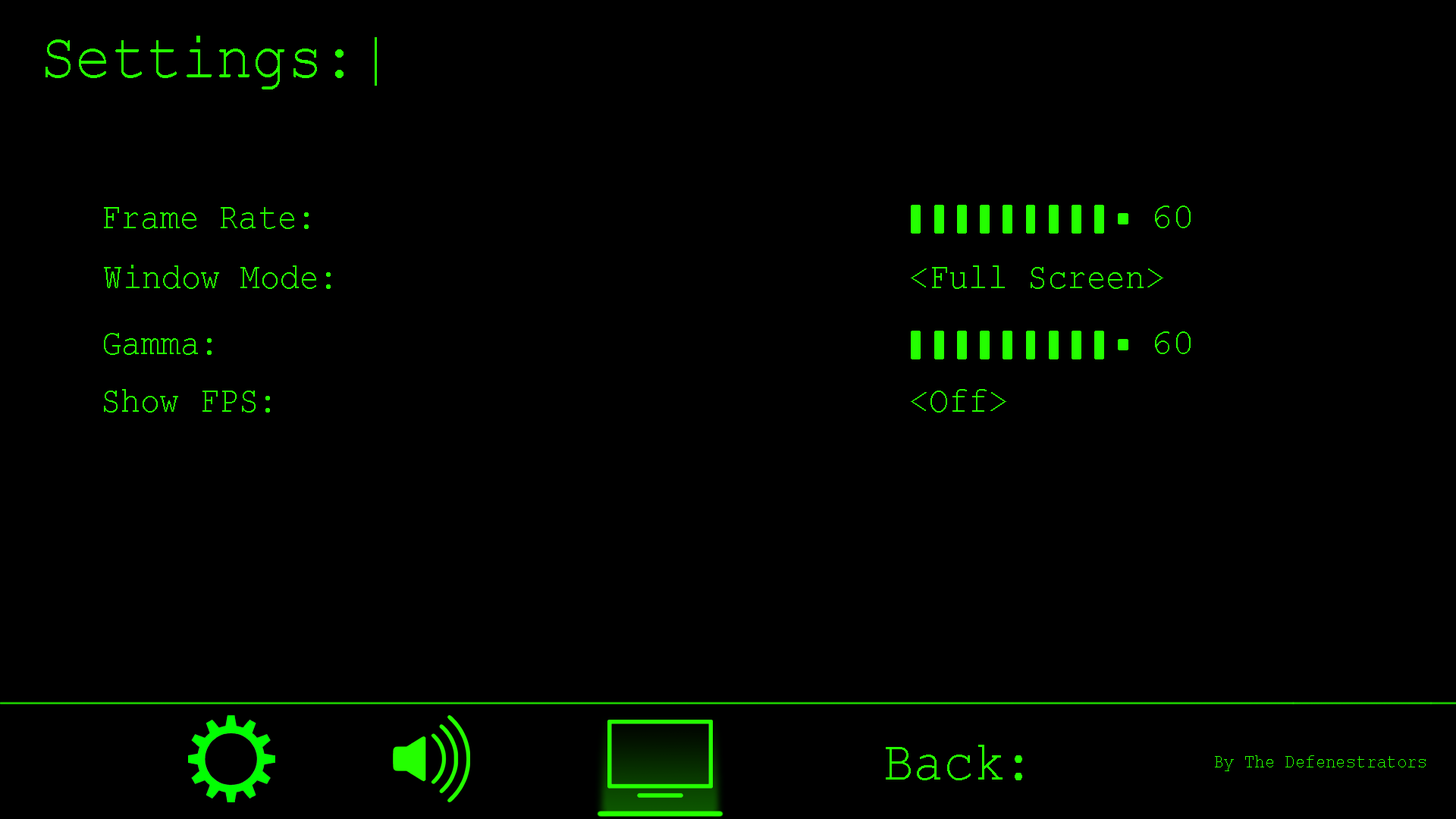
<style>
.page{position:relative;width:1456px;height:819px;background:#000000}
.page>*{position:absolute;margin:0}
.t1{font:65.3px "CourierNewPSMT";color:#24ff00;scale:0.9 1}
.t2{font:36.4px "CourierNewPSMT";color:#24ff00;scale:0.9 1}
.t3{font:55.9px "CourierNewPSMT";color:#24ff00;scale:0.9 1}
.t4{font:18.8px "CourierNewPSMT";color:#24ff00;scale:0.9 1}
</style>
<div class="page">
<p class="t1" style="left:45px;top:36px;width:332px;height:53px">Settings:|</p>
<p class="t2" style="left:104px;top:207px;width:205px;height:22px">Frame Rate:</p>
<p class="t2" style="left:104px;top:265px;width:227px;height:24px">Window Mode:</p>
<p class="t2" style="left:911px;top:265px;width:252px;height:24px">&lt;Full Screen&gt;</p>
<p class="t2" style="left:104px;top:333px;width:108px;height:22px">Gamma:</p>
<p class="t2" style="left:104px;top:389px;width:166px;height:24px">Show FPS:</p>
<p class="t2" style="left:911px;top:389px;width:95px;height:24px">&lt;Off&gt;</p>
<p class="t3" style="left:886px;top:745px;width:136px;height:35px">Back:</p>
<p class="t4" style="left:1215px;top:755px;width:211px;height:16px">By The Defenestrators</p>
</div>
